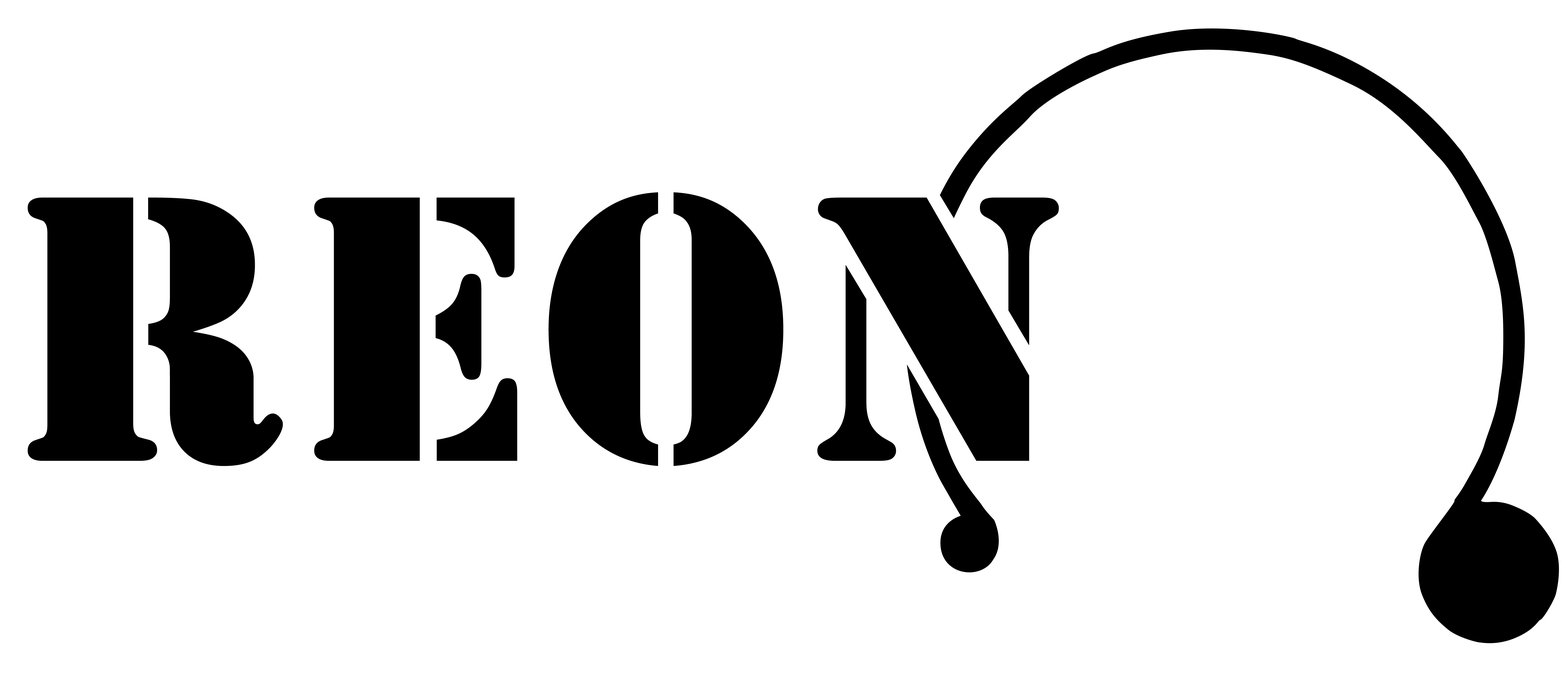
<style>
.page{position:relative;width:1568px;height:674px;background:#ffffff}
.page>*{position:absolute;margin:0}
.t1{font:394.6px "Stencil";color:#000000;font-weight:bold}
</style>
<div class="page">
<p class="t1" style="left:28px;top:192px;width:1031px;height:274px">REON</p>
</div>
